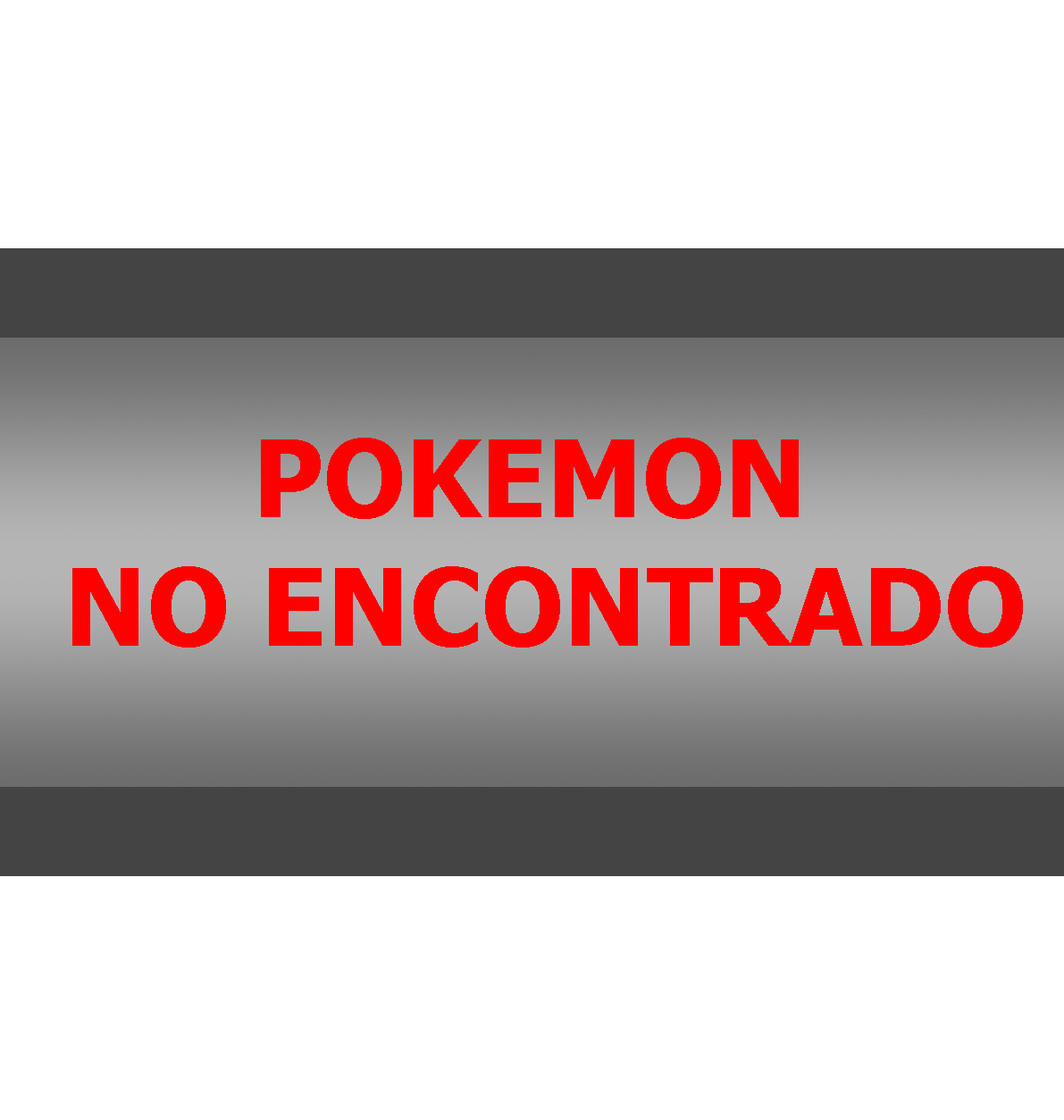
<style>
.page{position:relative;width:1064px;height:1120px;background:#ffffff}
.page>*{position:absolute;margin:0}
.t1{font:107.2px "Tahoma-Bold";color:#ff0000}
</style>
<div class="page">
<p class="t1" style="left:72px;top:438px;width:951px;height:210px;text-align:center">POKEMON <br>NO ENCONTRADO</p>
</div>
